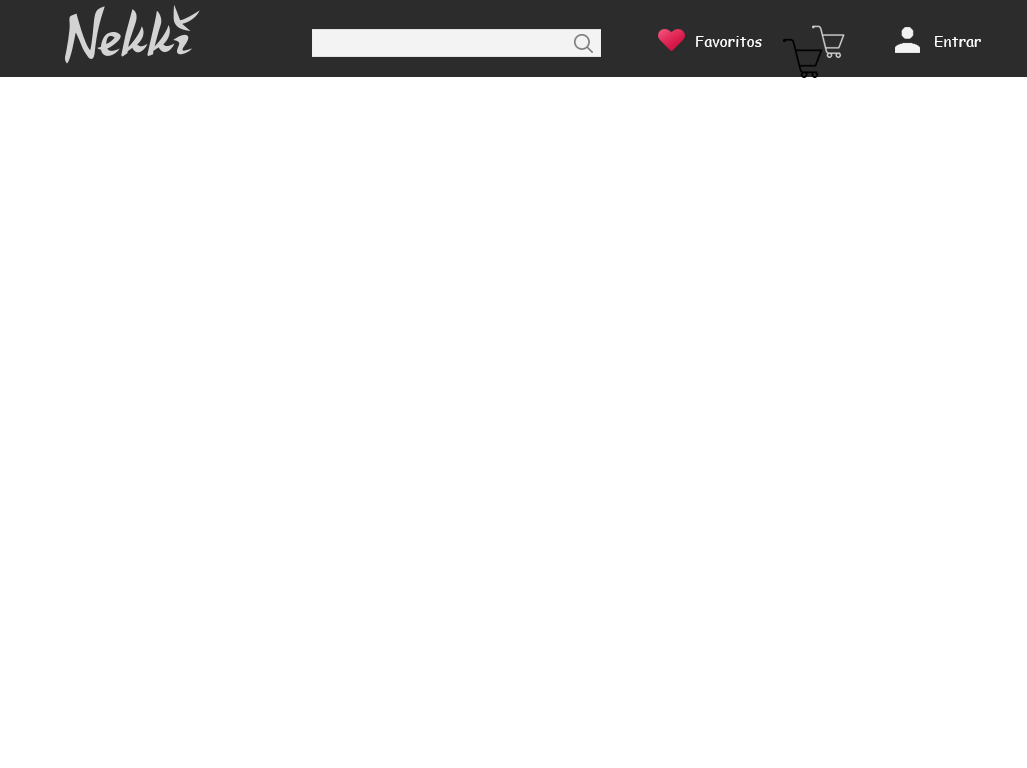
<style>
.page{position:relative;width:1027px;height:768px;background:#ffffff}
.page>*{position:absolute;margin:0}
.t1{font:15.3px "ComicSansMS";color:#ffffff}
</style>
<div class="page">
<p class="t1" style="left:696px;top:36px;width:66px;height:12px">Favoritos</p>
<p class="t1" style="left:934px;top:36px;width:47px;height:11px">Entrar</p>
</div>
